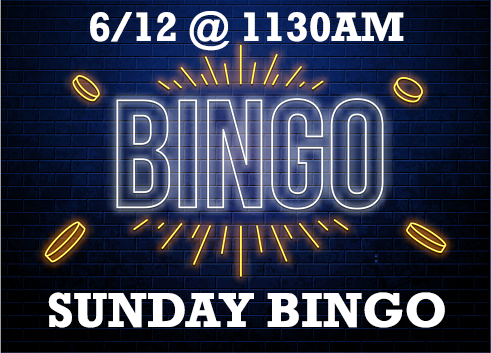
<style>
.page{position:relative;width:491px;height:353px}
.page>*{position:absolute;margin:0}
.t1{font:41.7px "Rockwell-Bold";color:#ffffff}
.t2{font:50px "Rockwell-Bold";color:#ffffff}
</style>
<div class="page">
<p class="t1" style="left:90px;top:11px;width:314px;height:40px">6/12 @ 1130AM</p>
<p class="t2" style="left:48px;top:292px;width:397px;height:36px">SUNDAY BINGO</p>
</div>
